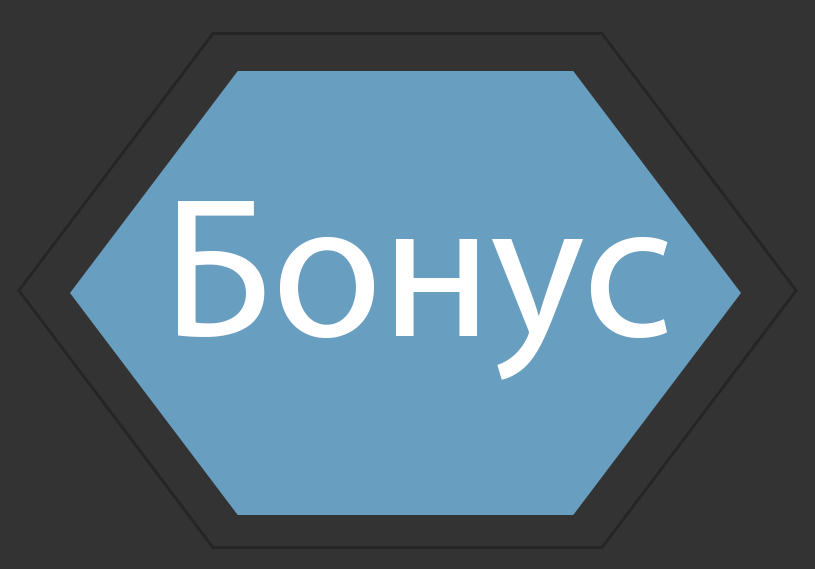
<style>
.page{position:relative;width:815px;height:569px;background:#333333}
.page>*{position:absolute;margin:0}
.t1{font:200px "MyriadPro-Regular";color:#ffffff}
</style>
<div class="page">
<p class="t1" style="left:178px;top:201px;width:490px;height:179px">Бонус</p>
</div>
